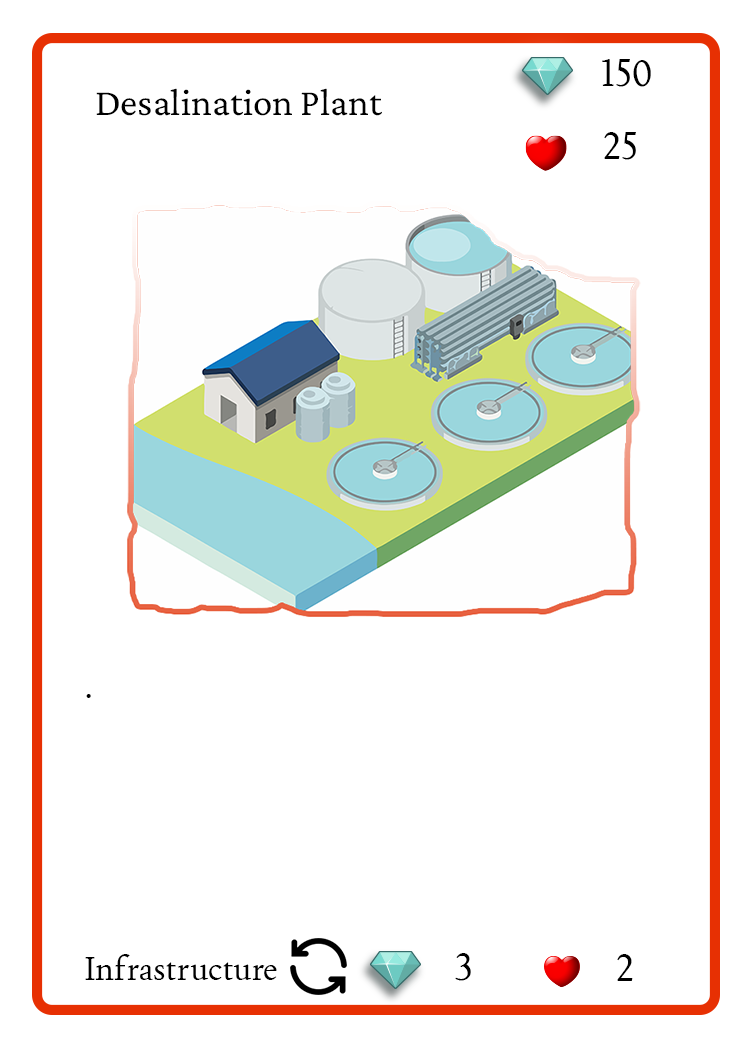
<style>
.page{position:relative;width:750px;height:1050px;background:#ffffff}
.page>*{position:absolute;margin:0}
.t1{font:37.5px "Joan-Regular";color:#000000;text-transform:uppercase}
.t2{font:38.9px "CrimsonPro-Regular";color:#000000}
.t3{font:33.3px "Joan-Regular";color:#000000}
</style>
<div class="page">
<p class="t1" style="left:602px;top:59px;width:49px;height:28px">150</p>
<p class="t2" style="left:96px;top:88px;width:286px;height:28px">Desalination Plant</p>
<p class="t1" style="left:604px;top:132px;width:32px;height:28px">25</p>
<p class="t3" style="left:86px;top:694px;width:5px;height:4px">.</p>
<p class="t1" style="left:455px;top:953px;width:16px;height:28px">3</p>
<p class="t3" style="left:85px;top:954px;width:192px;height:26px">Infrastructure</p>
<p class="t1" style="left:617px;top:954px;width:16px;height:27px">2</p>
</div>
